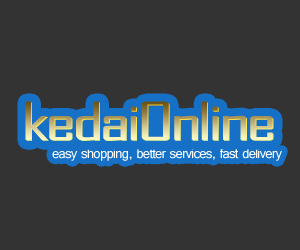
<style>
.page{position:relative;width:300px;height:250px;background:#333333}
.page>*{position:absolute;margin:0}
.t1{font:50px "AgencyFB-Reg";letter-spacing:-0.05em;scale:1.67 1}
.t2{font:17px "Tunga";letter-spacing:-0.05em;color:#ffffff}
</style>
<div class="page">
<p class="t1" style="left:25px;top:101px;width:248px;height:39px">kedaiOnline</p>
<p class="t1" style="left:26px;top:102px;width:248px;height:39px">kedaiOnline</p>
<p class="t2" style="left:52px;top:148px;width:230px;height:13px">easy shopping, better services, fast delivery</p>
</div>
